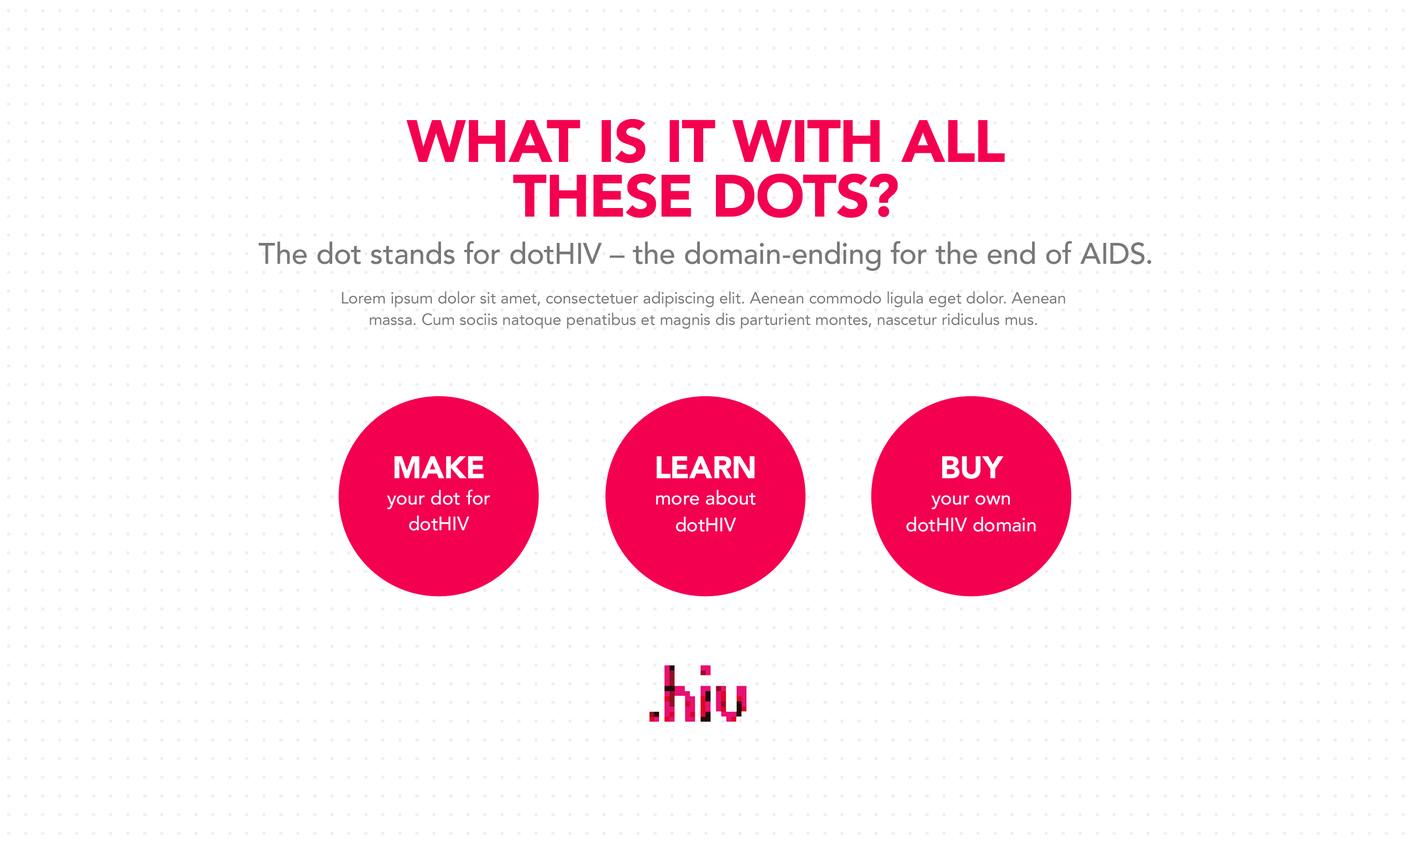
<style>
.page{position:relative;width:1412px;height:845px;background:#ffffff}
.page>*{position:absolute;margin:0}
.t1{font:58.9px/54.8px "AvenirLTStd-Black";color:#f40050;text-transform:uppercase}
.t2{font:29.5px "AvenirLTStd-Medium";color:#787878}
.t3{font:16.1px/21.6px "AvenirLTStd-Roman";color:#787878}
.t4{font:31.1px "AvenirLTStd-Black";color:#ffffff}
.t5{font:19.3px/25.9px "AvenirLTStd-Medium";color:#ffffff}
</style>
<div class="page">
<p class="t1" style="left:406px;top:119px;width:599px;height:99px;text-align:center">What is it with all <br>these dots?</p>
<p class="t2" style="left:258px;top:241px;width:894px;height:30px">The dot stands for dotHIV – the domain-ending for the end of AIDS.</p>
<p class="t3" style="left:342px;top:291px;width:723px;height:37px;text-align:center">Lorem ipsum dolor sit amet, consectetuer adipiscing elit. Aenean commodo ligula eget dolor. Aenean <br>massa. Cum sociis natoque penatibus et magnis dis parturient montes, nascetur ridiculus mus.</p>
<p class="t4" style="left:394px;top:456px;width:90px;height:22px">MAKE</p>
<p class="t4" style="left:656px;top:456px;width:98px;height:22px">LEARN</p>
<p class="t4" style="left:942px;top:456px;width:62px;height:23px">BUY</p>
<p class="t5" style="left:387px;top:489px;width:103px;height:41px;text-align:center">your dot for <br>dotHIV</p>
<p class="t5" style="left:656px;top:489px;width:100px;height:43px;text-align:center">more about<br>dotHIV</p>
<p class="t5" style="left:906px;top:495px;width:130px;height:37px;text-align:center">your own<br>dotHIV domain</p>
</div>
